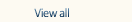
<style>
.page{position:relative;width:132px;height:22px;background:#fdfaf2}
.page>*{position:absolute;margin:0}
.t1{font:13px "Calibri";letter-spacing:-0.04em;scale:0.94 1}
</style>
<div class="page">
<p class="t1" style="left:34px;top:8px;width:35px;height:9px">View all</p>
</div>
